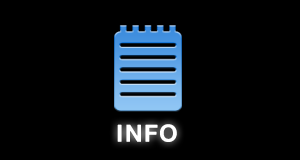
<style>
.page{position:relative;width:300px;height:160px;background:#000000}
.page>*{position:absolute;margin:0}
.t1{font:24px "AlteHaasGrotesk_Bold";letter-spacing:0.05em;color:#ffffff}
</style>
<div class="page">
<p class="t1" style="left:117px;top:124px;width:60px;height:18px">INFO</p>
</div>
